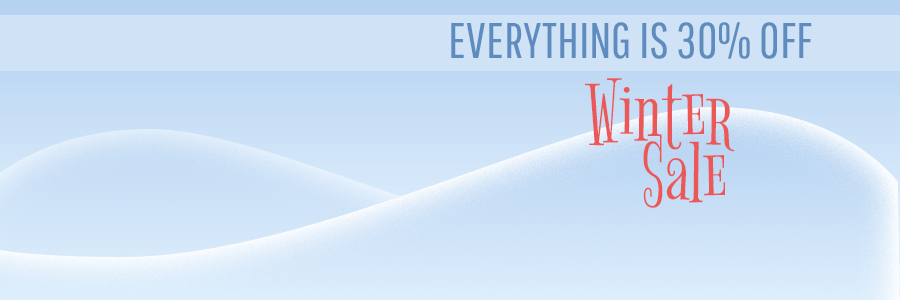
<style>
.page{position:relative;width:900px;height:300px}
.page>*{position:absolute;margin:0}
.t1{font:50px "PathwayGothicOne-Regular";color:#5f8cbf;text-transform:uppercase}
.t2{font:91.7px "BigelowRules-Regular";color:#ea5858}
</style>
<div class="page">
<p class="t1" style="left:451px;top:22px;width:361px;height:37px">everything is 30% off</p>
<p class="t2" style="left:585px;top:78px;width:150px;height:74px">Winter</p>
<p class="t2" style="left:643px;top:135px;width:82px;height:73px">Sale</p>
</div>
